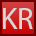
<style>
.page{position:relative;width:36px;height:36px;background:#680000}
.page>*{position:absolute;margin:0}
.t1{font:30.5px "MyriadPro-Regular";color:#d7d7d7}
</style>
<div class="page">
<p class="t1" style="left:3px;top:8px;width:30px;height:21px">KR</p>
</div>
